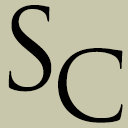
<style>
.page{position:relative;width:128px;height:128px;background:#c9c7ab}
.page>*{position:absolute;margin:0}
.t1{font:110px "TrajanPro3-Regular";color:#000000}
.t2{font:95px "TrajanPro3-Regular";color:#000000}
</style>
<div class="page">
<p class="t1" style="left:8px;top:5px;width:44px;height:87px">S</p>
<p class="t2" style="left:58px;top:48px;width:65px;height:75px">C</p>
</div>
